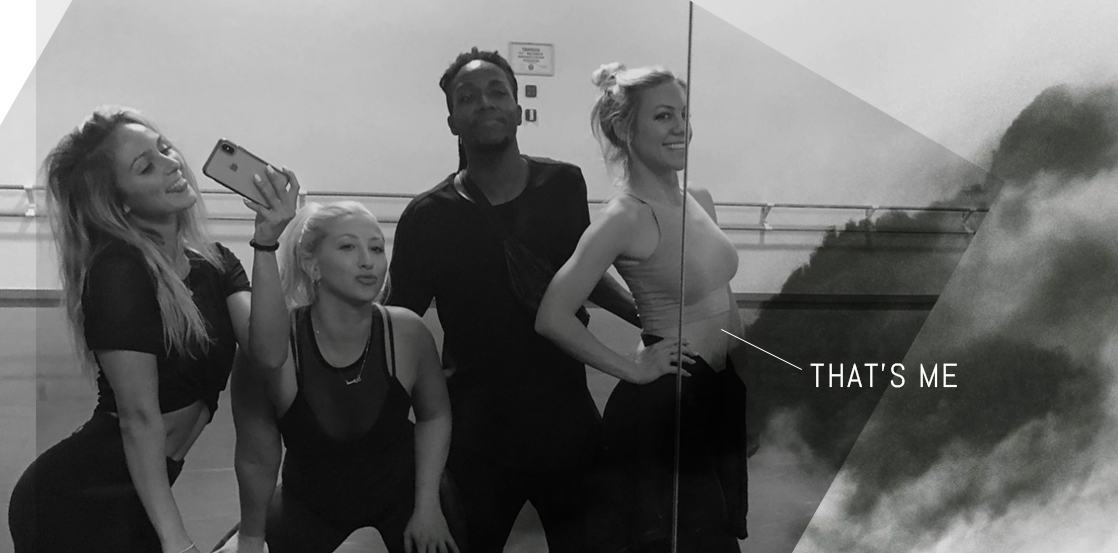
<style>
.page{position:relative;width:1118px;height:553px}
.page>*{position:absolute;margin:0}
.t1{font:33.3px "Abel-Regular";letter-spacing:0.06em;color:#ffffff}
</style>
<div class="page">
<p class="t1" style="left:810px;top:363px;width:147px;height:25px">THAT’S ME</p>
</div>
